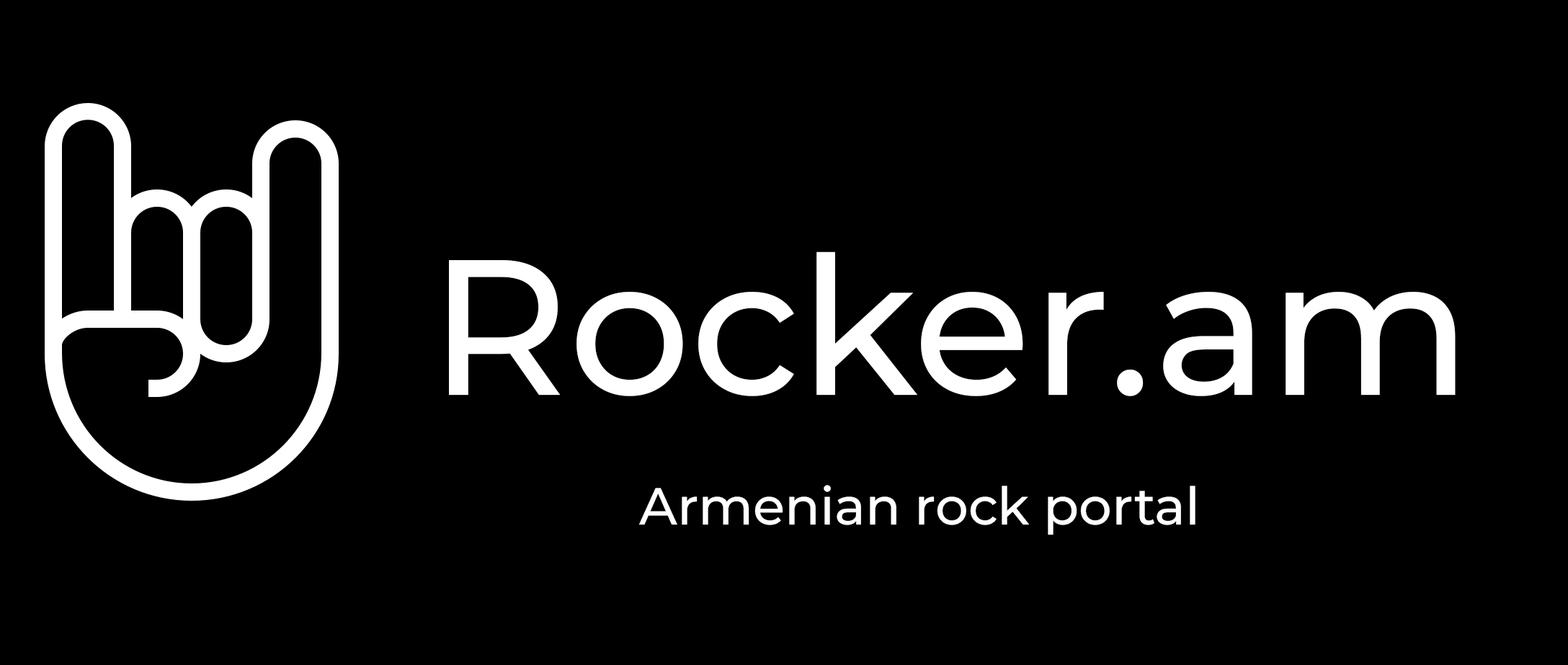
<style>
.page{position:relative;width:1568px;height:665px;background:#000000}
.page>*{position:absolute;margin:0}
.t1{font:51.9px/129.7px "Montserrat-Medium";color:#ffffff}
.t2{font:192.4px "Montserrat-Medium";color:#ffffff}
.t3{font:192.4px/172.2px "Montserrat-Medium";color:#ffffff}
</style>
<div class="page">
<p class="t1" style="left:449px;top:251px;width:1007px;height:284px;text-align:center"><span class="t2">Rocker.</span><span class="t3">am<br></span>                   Armenian rock portal</p>
</div>
